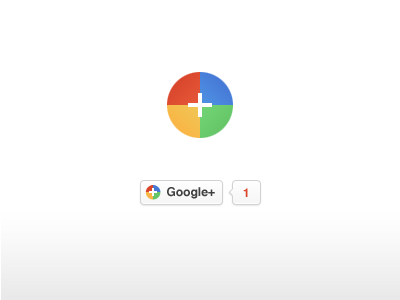
<style>
.page{position:relative;width:400px;height:300px;background:#ffffff}
.page>*{position:absolute;margin:0}
.t1{font:12px "Helvetica-Bold";color:#414040}
.t2{font:12px "Helvetica-Bold";color:#d9462c}
</style>
<div class="page">
<p class="t1" style="left:167px;top:187px;width:48px;height:12px">Google+</p>
<p class="t2" style="left:243px;top:188px;width:5px;height:9px">1</p>
</div>
